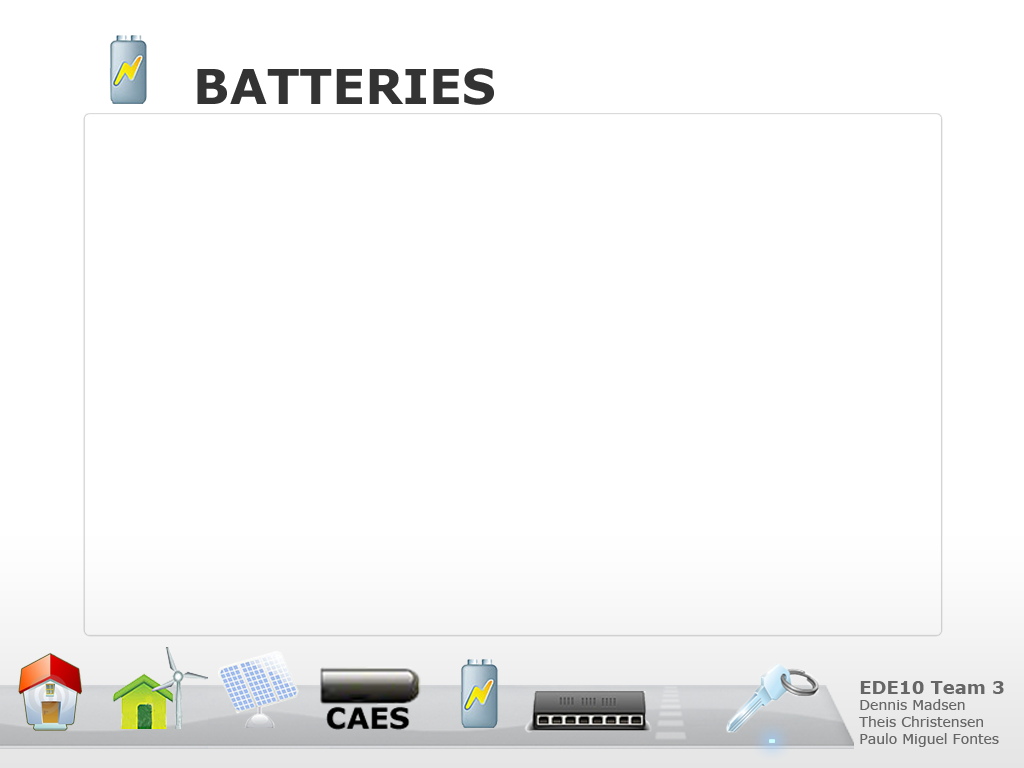
<style>
.page{position:relative;width:1024px;height:768px;background:#ffffff}
.page>*{position:absolute;margin:0}
.t1{font:48px "Verdana-Bold";color:#333333}
.t2{font:14px "Verdana";color:#666666}
.t3{font:18px "Verdana-Bold";color:#666666}
</style>
<div class="page">
<p class="t1" style="left:197px;top:68px;width:297px;height:37px">BATTERIES</p>
<p class="t2" style="left:859px;top:681px;width:145px;height:66px"><span class="t3">EDE10 Team 3<br></span>Dennis Madsen<br>Theis Christensen<br>Paulo Miguel Fontes</p>
</div>
